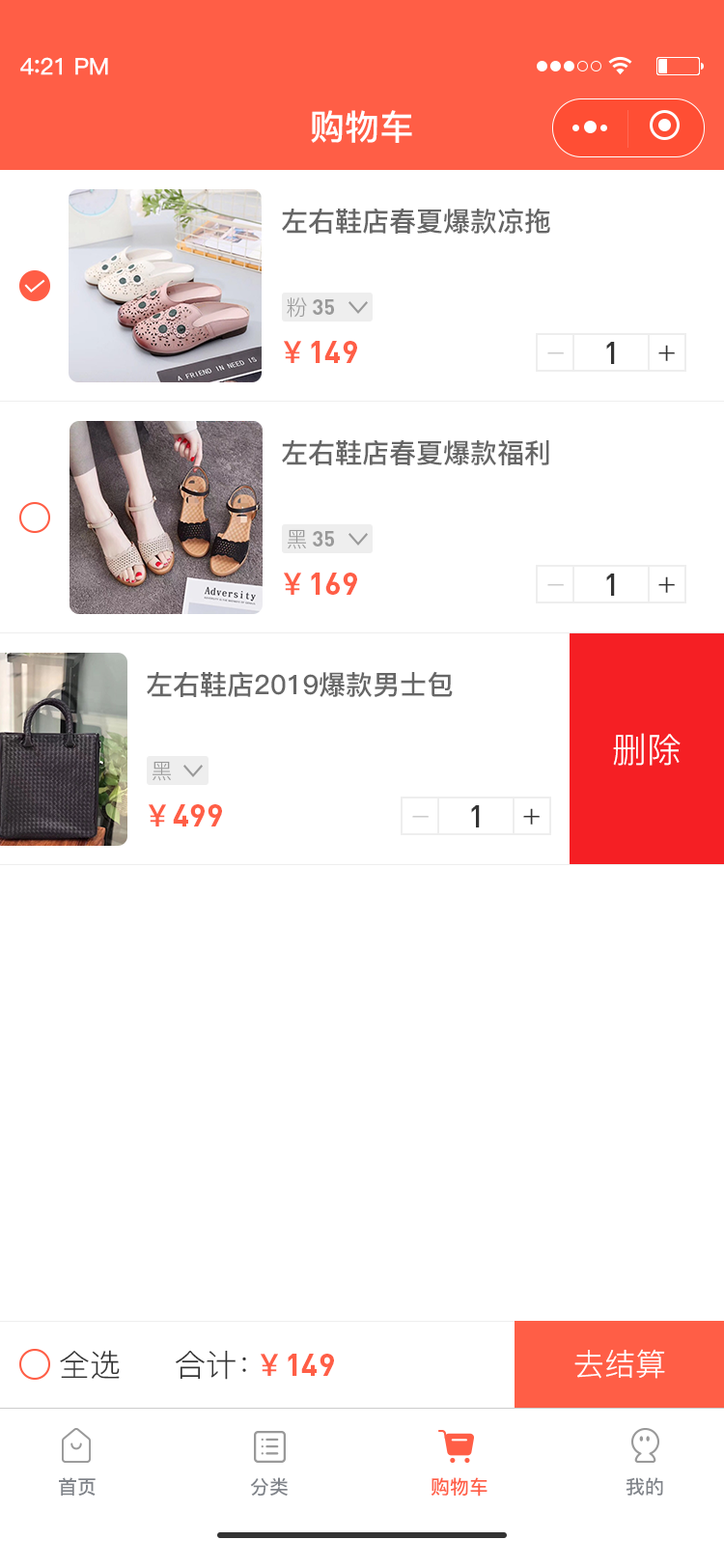
<style>
.page{position:relative;width:724px;height:1568px;background:#ffffff}
.page>*{position:absolute;margin:0}
.t1{font:23.2px "PingFang-SC-Bold";letter-spacing:-0.02em;color:#fefefe}
.t2{font:25.1px "PingFang-SC-Bold";letter-spacing:-0.02em;color:#fefefe}
.t3{font:34.8px "PingFang-SC-Bold";color:#ffffff}
.t4{font:27px "PingFang-SC-Bold";color:#666666}
.t5{font:21.2px "PingFang-SC-Regular";color:#999999}
.t6{font:21.2px "DIN-Bold";color:#999999}
.t7{font:30.9px "DIN-Bold";color:#ff5e46}
.t8{font:30.9px "PingFang-SC-Bold";color:#ff5e46}
.t9{font:30.9px "DIN-Medium";color:#333333}
.t10{font:30.9px "PingFang-SC-Regular";color:#cccccc}
.t11{font:30.9px "PingFang-SC-Regular";color:#333333}
.t12{font:34.8px "PingFang-SC-Regular";color:#ffffff}
.t13{font:30.9px "PingFang-SC-Regular";color:#ffffff}
.t14{font:19.3px "PingFang-SC-Bold";color:#7f8389}
.t15{font:19.3px "PingFang-SC-Bold";color:#ff5e46}
</style>
<div class="page">
<p class="t1" style="left:20px;top:57px;width:88px;height:18px">4<span class="t2">:</span>21 PM</p>
<p class="t3" style="left:311px;top:110px;width:101px;height:33px">购物车</p>
<p class="t4" style="left:282px;top:208px;width:268px;height:26px">左右鞋店春夏爆款凉拖</p>
<p class="t5" style="left:287px;top:297px;width:20px;height:21px">粉</p>
<p class="t6" style="left:313px;top:299px;width:21px;height:16px">35</p>
<p class="t7" style="left:284px;top:341px;width:73px;height:22px"><span class="t8">￥</span>149</p>
<p class="t9" style="left:606px;top:342px;width:9px;height:22px">1</p>
<p class="t10" style="left:547px;top:351px;width:17px;height:3px">-</p>
<p class="t11" style="left:658px;top:345px;width:17px;height:16px">+</p>
<p class="t4" style="left:282px;top:439px;width:267px;height:26px">左右鞋店春夏爆款福利</p>
<p class="t5" style="left:288px;top:529px;width:18px;height:20px">黑</p>
<p class="t6" style="left:313px;top:531px;width:21px;height:15px">35</p>
<p class="t7" style="left:284px;top:573px;width:73px;height:22px"><span class="t8">￥</span>169</p>
<p class="t9" style="left:606px;top:574px;width:9px;height:22px">1</p>
<p class="t11" style="left:658px;top:576px;width:17px;height:17px">+</p>
<p class="t10" style="left:547px;top:583px;width:17px;height:3px">-</p>
<p class="t4" style="left:147px;top:671px;width:306px;height:26px">左右鞋店2019爆款男士包</p>
<p class="t12" style="left:613px;top:733px;width:68px;height:33px">删除</p>
<p class="t5" style="left:153px;top:761px;width:18px;height:20px">黑</p>
<p class="t7" style="left:149px;top:804px;width:73px;height:22px"><span class="t8">￥</span>499</p>
<p class="t9" style="left:471px;top:805px;width:9px;height:22px">1</p>
<p class="t11" style="left:523px;top:808px;width:17px;height:17px">+</p>
<p class="t10" style="left:412px;top:815px;width:17px;height:3px">-</p>
<p class="t11" style="left:60px;top:1350px;width:60px;height:29px">全选</p>
<p class="t11" style="left:176px;top:1350px;width:70px;height:30px">合计：</p>
<p class="t13" style="left:574px;top:1349px;width:91px;height:30px">去结算</p>
<p class="t7" style="left:261px;top:1354px;width:73px;height:22px"><span class="t8">￥</span>149</p>
<p class="t14" style="left:59px;top:1477px;width:37px;height:19px">首页</p>
<p class="t14" style="left:250px;top:1477px;width:38px;height:19px">分类</p>
<p class="t15" style="left:432px;top:1477px;width:56px;height:20px">购物车</p>
<p class="t14" style="left:627px;top:1477px;width:36px;height:19px">我的</p>
</div>
